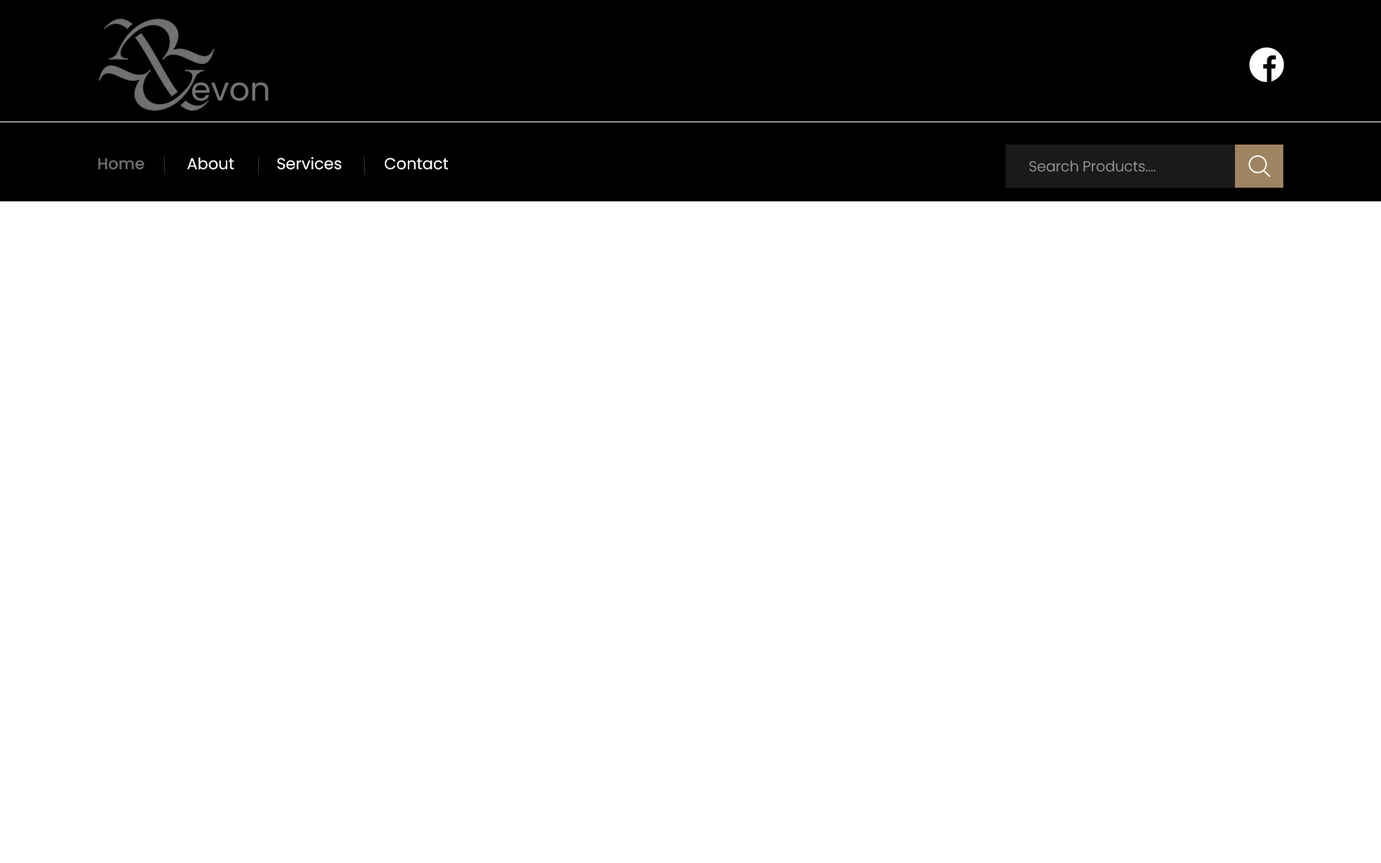
<style>
.page{position:relative;width:1381px;height:863px;background:#ffffff}
.page>*{position:absolute;margin:0}
.t1{font:32.4px "Poppins-Regular";color:#848484}
.t2{font:15.8px "Poppins-Regular";color:#ffffff}
.t3{font:15.8px "Poppins-Medium";color:#6c6c6c}
.t4{font:14.4px "Poppins-Light";color:#9f9d9d}
</style>
<div class="page">
<p class="t1" style="left:192px;top:82px;width:76px;height:19px;opacity:0.8">evon</p>
<p class="t2" style="left:98px;top:157px;width:350px;height:13px"><span class="t3">Home</span>          About          Services          Contact</p>
<p class="t4" style="left:1029px;top:160px;width:126px;height:12px">Search Products....</p>
</div>
